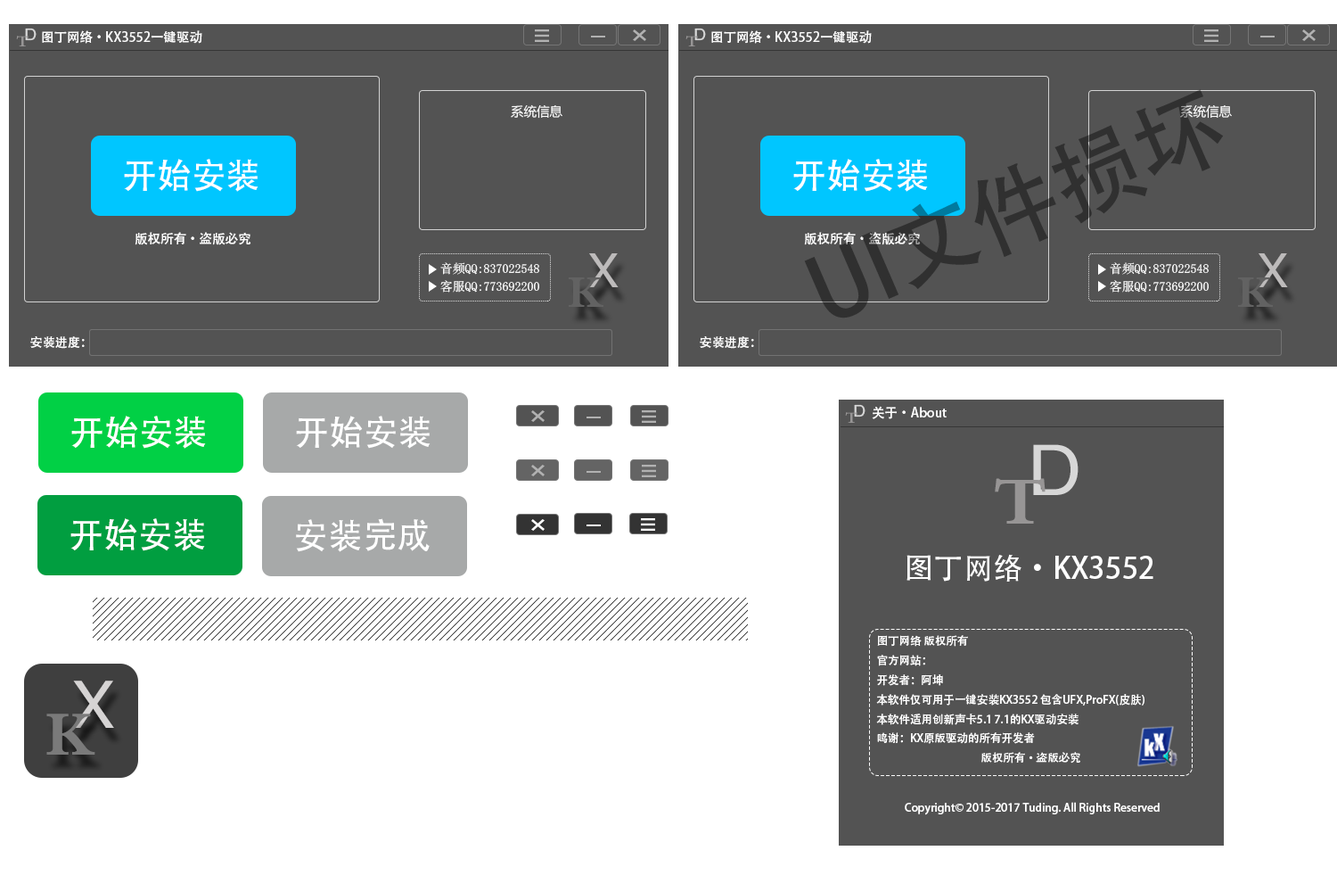
<style>
.page{position:relative;width:1337px;height:892px;background:#ffffff}
.page>*{position:absolute;margin:0}
.t1{font:16.3px "HDZK-GLXLZT-05";color:#d7d7d7;scale:1.06 1}
.t2{font:16.3px "²ÝÌ´Õ«Ã«Ôó¶«×ÖÌå";color:#979595;scale:1.06 1}
.t3{font:13px "AdobeHeitiStd-Regular";color:#fcfcfc}
.t4{font:89.2px "AdobeHeitiStd-Regular";color:#303030}
.t5{font:13px "MicrosoftYaHei";color:#fcfcfc}
.t6{font:34.6px "AdobeHeitiStd-Regular";color:#ffffff}
.t7{font:47.6px "HDZK-GLXLZT-05";color:#bdbbbb}
.t8{font:12.5px "SimSun";color:#ffffff}
.t9{font:47.6px "²ÝÌ´Õ«Ã«Ôó¶«×ÖÌå";color:#626262}
.t10{font:12.5px "AdobeHeitiStd-Regular";color:#fcfcfc}
.t11{font:13px "AdobeHeitiStd-Regular";color:#ffffff}
.t12{font:70.3px "HDZK-GLXLZT-05";color:#d7d7d7;scale:1.06 1}
.t13{font:70.3px "²ÝÌ´Õ«Ã«Ôó¶«×ÖÌå";color:#979595;scale:1.06 1}
.t14{font:29.7px "AdobeHeitiStd-Regular";color:#ffffff}
.t15{font:11.1px "AdobeHeitiStd-Regular";color:#ffffff}
.t16{font:65.8px "HDZK-GLXLZT-05";color:#d6d4d4}
.t17{font:65.8px "²ÝÌ´Õ«Ã«Ôó¶«×ÖÌå";color:#7a7a7a}
</style>
<div class="page">
<p class="t1" style="left:25px;top:28px;width:12px;height:13px">D</p>
<p class="t1" style="left:695px;top:28px;width:11px;height:13px">D</p>
<p class="t2" style="left:16px;top:36px;width:13px;height:10px">T</p>
<p class="t3" style="left:42px;top:30px;width:160px;height:14px">图丁网络·KX3552一键驱动</p>
<p class="t2" style="left:686px;top:36px;width:12px;height:10px">T</p>
<p class="t3" style="left:711px;top:30px;width:161px;height:14px">图丁网络·KX3552一键驱动</p>
<p class="t4" style="left:804px;top:89px;width:419px;height:229px;rotate:-23deg">UI文件损坏</p>
<p class="t5" style="left:511px;top:104px;width:52px;height:15px">系统信息</p>
<p class="t5" style="left:1180px;top:104px;width:52px;height:15px">系统信息</p>
<p class="t6" style="left:124px;top:159px;width:135px;height:33px">开始安装</p>
<p class="t6" style="left:794px;top:159px;width:134px;height:33px">开始安装</p>
<p class="t3" style="left:135px;top:232px;width:116px;height:13px">版权所有·盗版必究</p>
<p class="t3" style="left:804px;top:232px;width:117px;height:13px">版权所有·盗版必究</p>
<p class="t7" style="left:588px;top:253px;width:31px;height:34px">X</p>
<p class="t7" style="left:1258px;top:253px;width:30px;height:34px">X</p>
<p class="t8" style="left:440px;top:262px;width:99px;height:13px">音频QQ:837022548</p>
<p class="t8" style="left:1110px;top:262px;width:99px;height:13px">音频QQ:837022548</p>
<p class="t8" style="left:440px;top:280px;width:99px;height:12px">客服QQ:773692200</p>
<p class="t9" style="left:569px;top:277px;width:35px;height:30px">K</p>
<p class="t8" style="left:1110px;top:280px;width:99px;height:12px">客服QQ:773692200</p>
<p class="t9" style="left:1238px;top:277px;width:35px;height:30px">K</p>
<p class="t10" style="left:30px;top:336px;width:55px;height:13px">安装进度：</p>
<p class="t10" style="left:700px;top:336px;width:54px;height:13px">安装进度：</p>
<p class="t2" style="left:845px;top:412px;width:13px;height:11px">T</p>
<p class="t1" style="left:854px;top:404px;width:12px;height:13px">D</p>
<p class="t11" style="left:872px;top:406px;width:75px;height:13px">关于·About</p>
<p class="t6" style="left:71px;top:415px;width:135px;height:33px">开始安装</p>
<p class="t6" style="left:296px;top:415px;width:135px;height:33px">开始安装</p>
<p class="t12" style="left:1033px;top:444px;width:46px;height:51px">D</p>
<p class="t13" style="left:995px;top:478px;width:51px;height:45px">T</p>
<p class="t6" style="left:70px;top:518px;width:135px;height:33px">开始安装</p>
<p class="t6" style="left:296px;top:518px;width:134px;height:34px">安装完成</p>
<p class="t14" style="left:907px;top:554px;width:247px;height:27px">图丁网络·KX3552</p>
<p class="t15" style="left:876px;top:635px;width:269px;height:128px">图丁网络 版权所有<br>   官方网站：<br>   开发者：阿坤<br>   本软件仅可用于一键安装KX3552 包含UFX,ProFX(皮肤)<br>   本软件适用创新声卡5.1 7.1的KX驱动安装<br>   鸣谢：KX原版驱动的所有开发者<br>版权所有·盗版必究</p>
<p class="t16" style="left:72px;top:680px;width:42px;height:48px">X</p>
<p class="t17" style="left:46px;top:713px;width:49px;height:41px">K</p>
<p class="t15" style="left:905px;top:802px;width:255px;height:13px">Copyright© 2015-2017 Tuding. All Rights Reserved</p>
</div>
